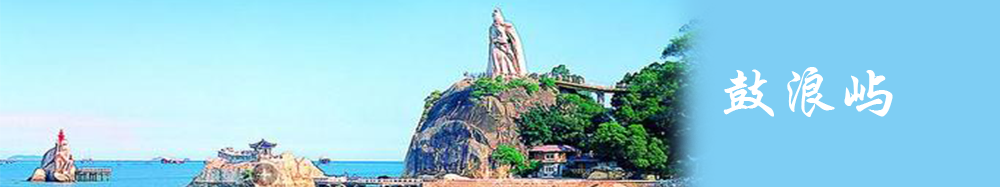
<style>
.page{position:relative;width:1000px;height:187px;background:#7ecef4}
.page>*{position:absolute;margin:0}
.t1{font:60px "STXingkai";color:#ffffff}
</style>
<div class="page">
<p class="t1" style="left:723px;top:67px;width:170px;height:50px">鼓浪屿</p>
</div>
